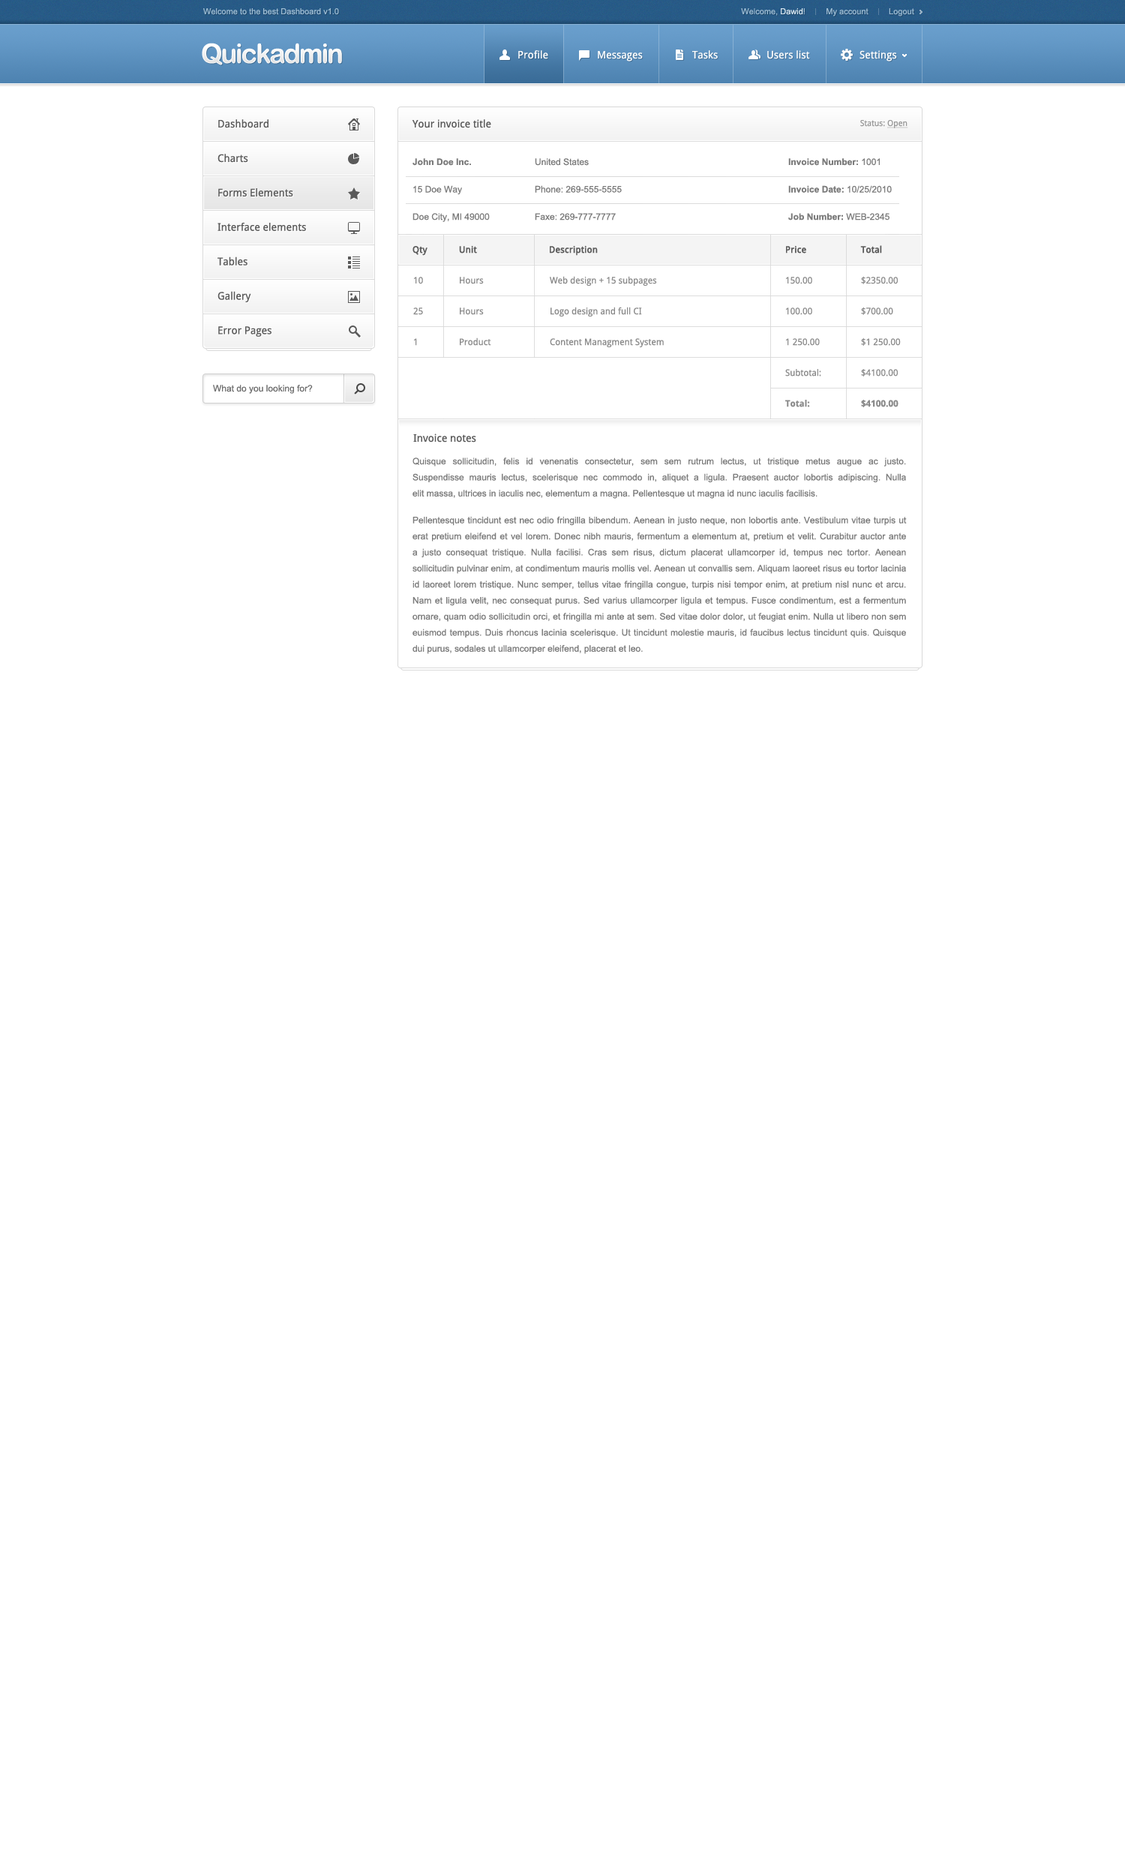
<style>
.page{position:relative;width:1125px;height:1875px;background:#ffffff}
.page>*{position:absolute;margin:0}
.t1{font:8.2px "ArialMT";color:#9ebdd4}
.t2{font:8.2px "ArialMT";color:#d7e7f2}
.t3{font:27px "ArialRoundedMTBold";letter-spacing:-0.06em;color:#ffffff}
.t4{font:10.5px "DroidSans";color:#ffffff}
.t5{font:10.5px "DroidSans";color:#5a5a5a}
.t6{font:8.2px "DroidSans";color:#999999}
.t7{font:8.2px "DroidSans";color:#999999;text-decoration:underline}
.t8{font:9px "ArialMT";color:#7c7c7c}
.t9{font:9px "Arial-BoldMT";color:#7c7c7c}
.t10{font:9px "DroidSans";color:#5a5a5a;font-weight:bold}
.t11{font:9px "DroidSans";color:#8b8b8b}
.t12{font:9px "DroidSans-Bold";color:#8b8b8b}
.t13{font:9px "ArialMT";color:#6f6f6f}
</style>
<div class="page">
<p class="t1" style="left:203px;top:8px;width:136px;height:7px">Welcome to the best Dashboard v1.0</p>
<p class="t1" style="left:741px;top:8px;width:173px;height:8px">Welcome, <span class="t2">Dawid</span>!         My account         Logout</p>
<p class="t3" style="left:202px;top:43px;width:140px;height:22px">Quickadmin</p>
<p class="t4" style="left:518px;top:50px;width:30px;height:9px">Profile</p>
<p class="t4" style="left:598px;top:51px;width:45px;height:11px">Messages</p>
<p class="t4" style="left:692px;top:50px;width:26px;height:9px">Tasks</p>
<p class="t4" style="left:767px;top:50px;width:43px;height:9px">Users list</p>
<p class="t4" style="left:860px;top:50px;width:37px;height:12px">Settings</p>
<p class="t5" style="left:218px;top:119px;width:88px;height:218px;text-align:justify">Dashboard<br>Charts<br>Forms Elements<br>Interface elements<br>Tables<br>Gallery<br>Error Pages</p>
<p class="t5" style="left:412px;top:119px;width:79px;height:9px">Your invoice title</p>
<p class="t6" style="left:860px;top:120px;width:48px;height:8px">Status: <span class="t7">Open</span></p>
<p class="t8" style="left:412px;top:158px;width:78px;height:64px;text-align:justify"><span class="t9">John Doe Inc.<br></span>15 Doe Way<br>Doe City, MI 49000</p>
<p class="t8" style="left:535px;top:158px;width:87px;height:62px;text-align:justify">United States<br>Phone: 269-555-5555<br>Faxe: 269-777-7777</p>
<p class="t9" style="left:788px;top:158px;width:104px;height:62px;text-align:justify">Invoice Number: <span class="t8">1001<br></span>Invoice Date: <span class="t8">10/25/2010<br></span>Job Number: <span class="t8">WEB-2345</span></p>
<p class="t10" style="left:412px;top:246px;width:16px;height:10px">Qty</p>
<p class="t10" style="left:459px;top:245px;width:18px;height:9px">Unit</p>
<p class="t10" style="left:550px;top:245px;width:48px;height:11px">Description</p>
<p class="t10" style="left:786px;top:245px;width:20px;height:9px">Price</p>
<p class="t10" style="left:860px;top:245px;width:22px;height:9px">Total</p>
<p class="t11" style="left:413px;top:277px;width:10px;height:69px;text-align:justify">10<br>25<br>1</p>
<p class="t11" style="left:460px;top:277px;width:31px;height:69px;text-align:justify">Hours<br>Hours<br>Product</p>
<p class="t11" style="left:550px;top:276px;width:114px;height:71px;text-align:justify">Web design + 15 subpages<br>Logo design and full CI<br>Content Managment System</p>
<p class="t11" style="left:785px;top:277px;width:36px;height:130px">150.00<br>100.00<br>1 250.00<br>Subtotal:<br><span class="t12">Total:</span></p>
<p class="t11" style="left:861px;top:276px;width:40px;height:131px">$2350.00<br>$700.00<br>$1 250.00<br>$4100.00<br><span class="t12">$4100.00</span></p>
<p class="t13" style="left:213px;top:385px;width:100px;height:9px">What do you looking for?</p>
<p class="t5" style="left:413px;top:434px;width:63px;height:8px">Invoice notes</p>
<p class="t8" style="left:412px;top:458px;width:495px;height:196px;text-align:justify">Quisque sollicitudin, felis id venenatis consectetur, sem sem rutrum lectus, ut tristique metus augue ac justo. <br>Suspendisse mauris lectus, scelerisque nec commodo in, aliquet a ligula. Praesent auctor lobortis adipiscing. Nulla <br>elit massa, ultrices in iaculis nec, elementum a magna. Pellentesque ut magna id nunc iaculis facilisis.  <br>Pellentesque tincidunt est nec odio fringilla bibendum. Aenean in justo neque, non lobortis ante. Vestibulum vitae turpis ut <br>erat pretium eleifend et vel lorem. Donec nibh mauris, fermentum a elementum at, pretium et velit. Curabitur auctor ante <br>a justo consequat tristique. Nulla facilisi. Cras sem risus, dictum placerat ullamcorper id, tempus nec tortor. Aenean <br>sollicitudin pulvinar enim, at condimentum mauris mollis vel. Aenean ut convallis sem. Aliquam laoreet risus eu tortor lacinia <br>id laoreet lorem tristique. Nunc semper, tellus vitae fringilla congue, turpis nisi tempor enim, at pretium nisl nunc et arcu. <br>Nam et ligula velit, nec consequat purus. Sed varius ullamcorper ligula et tempus. Fusce condimentum, est a fermentum <br>ornare, quam odio sollicitudin orci, et fringilla mi ante at sem. Sed vitae dolor dolor, ut feugiat enim. Nulla ut libero non sem <br>euismod tempus. Duis rhoncus lacinia scelerisque. Ut tincidunt molestie mauris, id faucibus lectus tincidunt quis. Quisque <br>dui purus, sodales ut ullamcorper eleifend, placerat et leo.</p>
</div>
